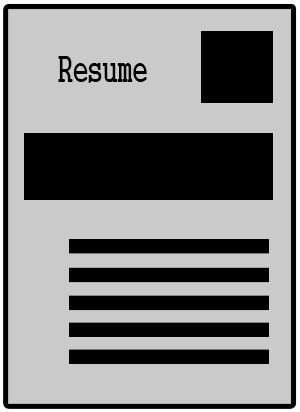
<style>
.page{position:relative;width:300px;height:412px;background:#cacaca}
.page>*{position:absolute;margin:0}
.t1{font:35.7px "GungsuhChe";color:#000000;scale:0.84 1}
</style>
<div class="page">
<p class="t1" style="left:58px;top:56px;width:89px;height:27px">Resume</p>
</div>
